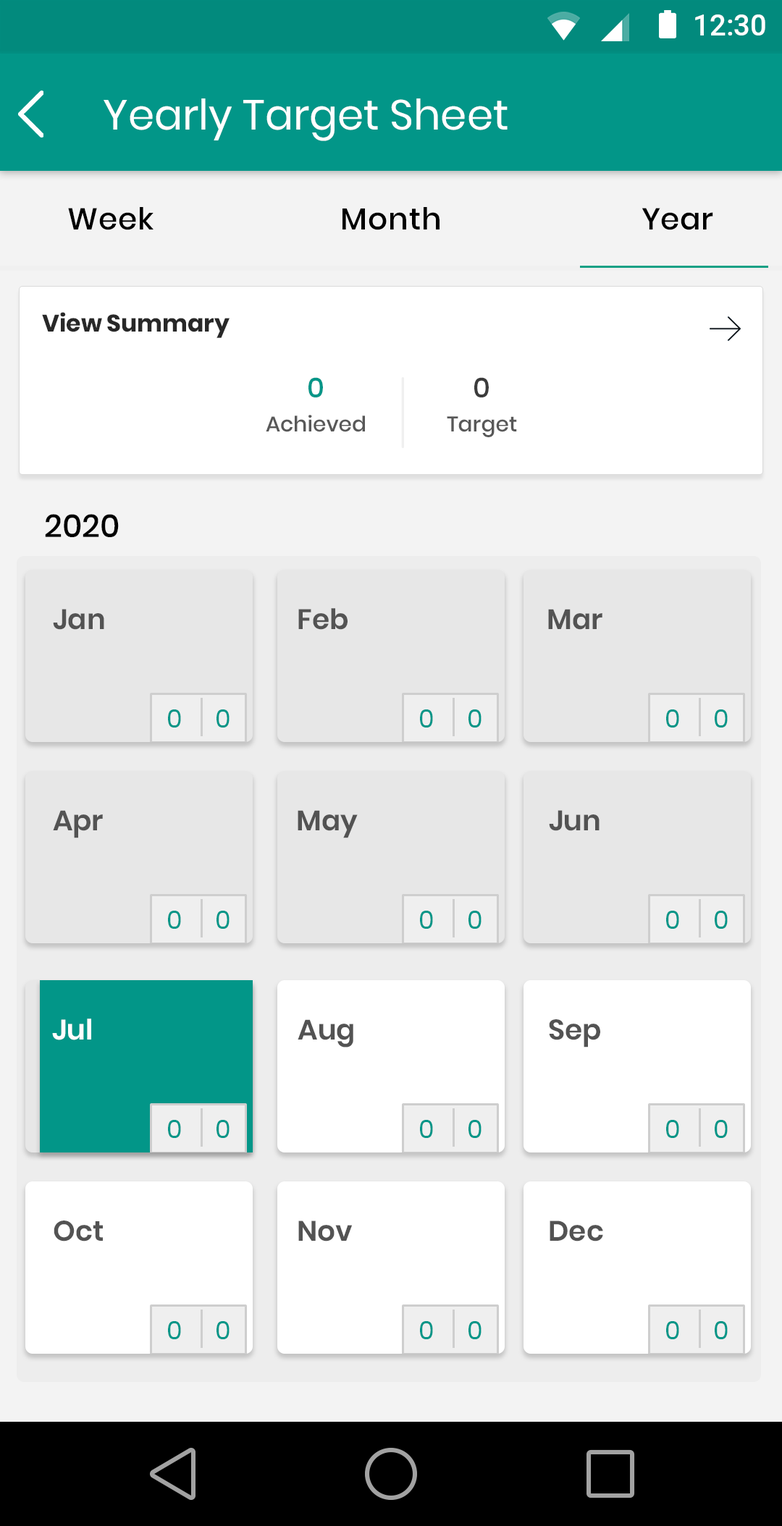
<style>
.page{position:relative;width:782px;height:1526px;background:#ffffff}
.page>*{position:absolute;margin:0}
.t1{font:29.8px "Roboto-Medium";color:#ffffff}
.t2{font:42px "Poppins-Regular";color:#ffffff}
.t3{font:30.2px "Poppins-Medium";letter-spacing:0.025em;color:#000000}
.t4{font:23.9px "Poppins-Bold";color:#282828}
.t5{font:23.9px "Poppins-Bold";color:#282828;text-transform:uppercase}
.t6{font:27.6px "Poppins-Medium";color:#029688}
.t7{font:27.6px "Poppins-Medium";color:#3b3b3b}
.t8{font:21.3px "Poppins-Medium";color:#585858}
.t9{font:31.8px "Poppins-Medium";color:#010101}
.t10{font:28.2px "Poppins-SemiBold";color:#535353}
.t11{font:25.4px "Poppins-Regular";color:#029688}
.t12{font:28.2px "Poppins-SemiBold";color:#ffffff}
</style>
<div class="page">
<p class="t1" style="left:695px;top:14px;width:70px;height:21px">12:30</p>
<p class="t2" style="left:103px;top:98px;width:404px;height:43px">Yearly Target Sheet</p>
<p class="t3" style="left:68px;top:207px;width:85px;height:23px">Week</p>
<p class="t3" style="left:342px;top:207px;width:97px;height:23px">Month</p>
<p class="t3" style="left:641px;top:208px;width:72px;height:22px">Year</p>
<p class="t4" style="left:42px;top:312px;width:187px;height:26px"><span class="t5">V</span>iew Summary</p>
<p class="t6" style="left:308px;top:377px;width:15px;height:20px">0</p>
<p class="t7" style="left:474px;top:377px;width:15px;height:20px">0</p>
<p class="t8" style="left:266px;top:415px;width:99px;height:17px">Achieved</p>
<p class="t8" style="left:447px;top:416px;width:70px;height:21px">Target</p>
<p class="t9" style="left:45px;top:514px;width:74px;height:23px">2020</p>
<p class="t10" style="left:53px;top:609px;width:51px;height:21px">Jan</p>
<p class="t10" style="left:298px;top:608px;width:49px;height:22px">Feb</p>
<p class="t10" style="left:548px;top:609px;width:54px;height:21px">Mar</p>
<p class="t11" style="left:168px;top:709px;width:13px;height:18px">0</p>
<p class="t11" style="left:216px;top:709px;width:13px;height:18px">0</p>
<p class="t11" style="left:420px;top:709px;width:13px;height:18px">0</p>
<p class="t11" style="left:468px;top:709px;width:13px;height:18px">0</p>
<p class="t11" style="left:666px;top:709px;width:13px;height:18px">0</p>
<p class="t11" style="left:714px;top:709px;width:13px;height:18px">0</p>
<p class="t10" style="left:53px;top:810px;width:50px;height:28px">Apr</p>
<p class="t10" style="left:297px;top:810px;width:61px;height:28px">May</p>
<p class="t10" style="left:549px;top:810px;width:50px;height:21px">Jun</p>
<p class="t11" style="left:168px;top:910px;width:13px;height:19px">0</p>
<p class="t11" style="left:216px;top:910px;width:13px;height:19px">0</p>
<p class="t11" style="left:420px;top:910px;width:13px;height:19px">0</p>
<p class="t11" style="left:468px;top:910px;width:13px;height:19px">0</p>
<p class="t11" style="left:666px;top:910px;width:13px;height:19px">0</p>
<p class="t11" style="left:714px;top:910px;width:13px;height:19px">0</p>
<p class="t12" style="left:52px;top:1018px;width:39px;height:22px">Jul</p>
<p class="t10" style="left:297px;top:1019px;width:56px;height:28px">Aug</p>
<p class="t10" style="left:549px;top:1019px;width:51px;height:28px">Sep</p>
<p class="t11" style="left:168px;top:1120px;width:13px;height:18px">0</p>
<p class="t11" style="left:216px;top:1120px;width:13px;height:18px">0</p>
<p class="t11" style="left:420px;top:1120px;width:13px;height:18px">0</p>
<p class="t11" style="left:468px;top:1120px;width:13px;height:18px">0</p>
<p class="t11" style="left:666px;top:1120px;width:13px;height:18px">0</p>
<p class="t11" style="left:714px;top:1120px;width:13px;height:18px">0</p>
<p class="t10" style="left:54px;top:1220px;width:49px;height:21px">Oct</p>
<p class="t10" style="left:298px;top:1220px;width:54px;height:21px">Nov</p>
<p class="t10" style="left:549px;top:1220px;width:54px;height:21px">Dec</p>
<p class="t11" style="left:168px;top:1321px;width:13px;height:18px">0</p>
<p class="t11" style="left:216px;top:1321px;width:13px;height:18px">0</p>
<p class="t11" style="left:420px;top:1321px;width:13px;height:18px">0</p>
<p class="t11" style="left:468px;top:1321px;width:13px;height:18px">0</p>
<p class="t11" style="left:666px;top:1321px;width:13px;height:18px">0</p>
<p class="t11" style="left:714px;top:1321px;width:13px;height:18px">0</p>
</div>
